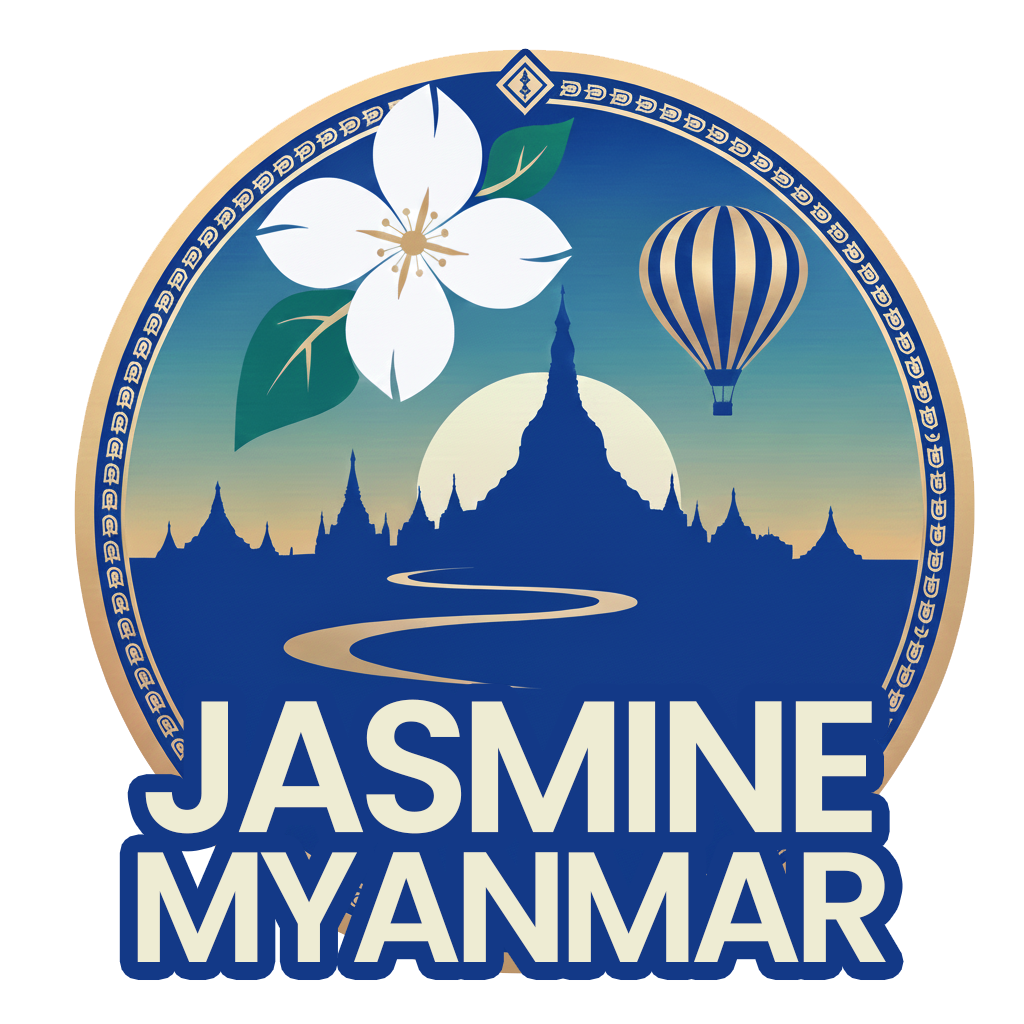
<style>
.page{position:relative;width:1024px;height:1024px;background:#ffffff}
.page>*{position:absolute;margin:0}
.t1{font:186.8px/129.6px "Poppins-SemiBold";letter-spacing:-0.06em;color:#eeecd3;text-transform:uppercase}
.t2{font:156.9px/129.6px "Poppins-SemiBold";letter-spacing:-0.06em;color:#eeecd3;text-transform:uppercase}
</style>
<div class="page">
<p class="t1" style="left:137px;top:699px;width:749px;height:263px;text-align:center">Jasmine<br><span class="t2">Myanmar</span></p>
</div>
